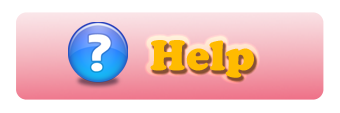
<style>
.page{position:relative;width:340px;height:113px;background:#ffffff}
.page>*{position:absolute;margin:0}
.t1{font:44.3px "CooperBlack";color:#ffbb00}
</style>
<div class="page">
<p class="t1" style="left:150px;top:40px;width:104px;height:38px">Help</p>
</div>
